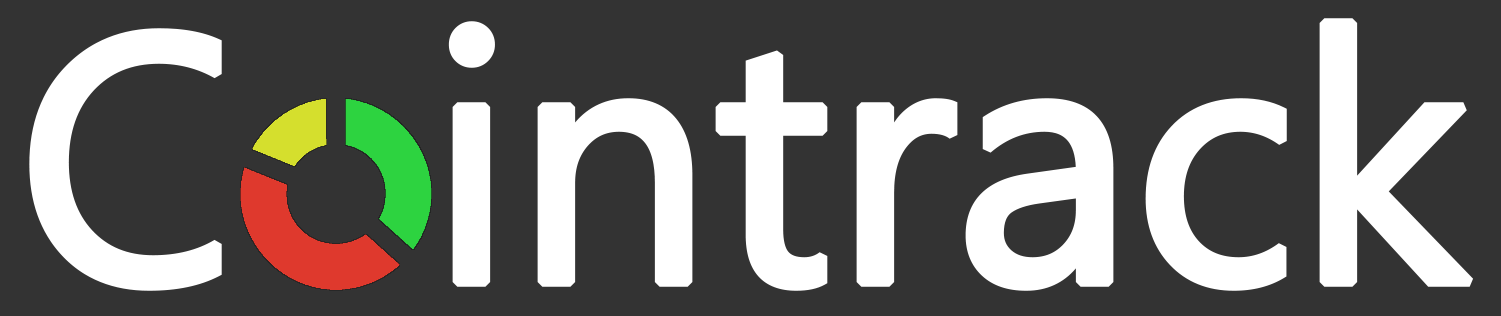
<style>
.page{position:relative;width:1501px;height:316px;background:#333333}
.page>*{position:absolute;margin:0}
.t1{font:350px "SegoeUI";letter-spacing:-0.025em;color:#ffffff;font-weight:bold}
</style>
<div class="page">
<p class="t1" style="left:29px;top:18px;width:1445px;height:273px">C  intrack</p>
</div>
